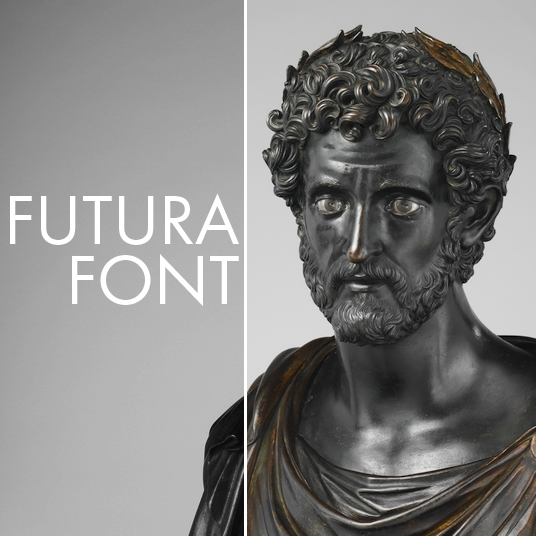
<style>
.page{position:relative;width:536px;height:536px}
.page>*{position:absolute;margin:0}
.t1{font:72px/60px "FuturaPT-Book";color:#ffffff}
</style>
<div class="page">
<p class="t1" style="left:10px;top:193px;width:229px;height:114px;text-align:right">FUTURA<br>FONT</p>
</div>
